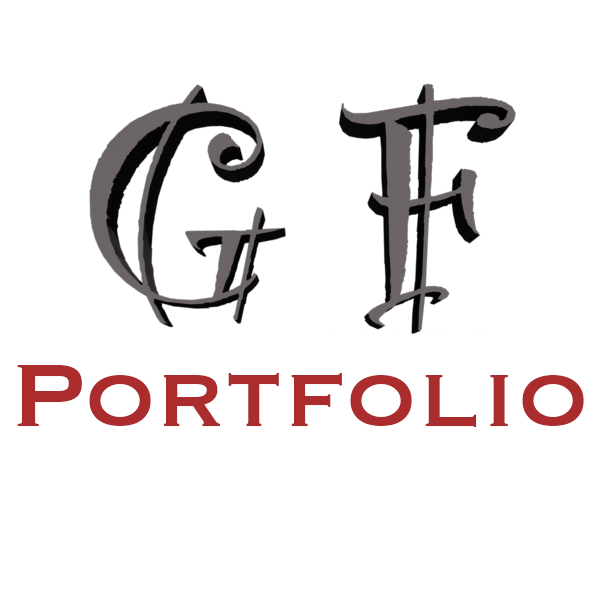
<style>
.page{position:relative;width:600px;height:600px;background:#ffffff}
.page>*{position:absolute;margin:0}
.t1{font:114.6px "Copperplate";color:#ab2c2c}
</style>
<div class="page">
<p class="t1" style="left:17px;top:365px;width:567px;height:62px">Portfolio</p>
</div>
